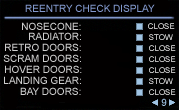
<style>
.page{position:relative;width:179px;height:110px;background:#020000}
.page>*{position:absolute;margin:0}
.t1{font:10px "ArialMT";color:#8298cc;font-variant:small-caps}
.t2{font:10px "ArialMT";color:#cdcdcd;font-variant:small-caps}
.t3{font:8px "ArialMT";font-variant:small-caps}
.t4{font:10px "ArialMT";color:#9fc3e3;font-variant:small-caps}
</style>
<div class="page">
<p class="t1" style="left:25px;top:4px;width:130px;height:8px">REENTRY CHECK DISPLAY</p>
<p class="t2" style="left:22px;top:22px;width:59px;height:8px">NOSECONE:</p>
<p class="t3" style="left:148px;top:23px;width:27px;height:6px">CLOSE</p>
<p class="t2" style="left:29px;top:32px;width:52px;height:8px">RADIATOR:</p>
<p class="t3" style="left:149px;top:34px;width:24px;height:6px">STOW</p>
<p class="t2" style="left:3px;top:54px;width:78px;height:8px">SCRAM DOORS:</p>
<p class="t2" style="left:5px;top:43px;width:76px;height:8px">RETRO DOORS:</p>
<p class="t3" style="left:149px;top:45px;width:27px;height:6px">CLOSE</p>
<p class="t2" style="left:5px;top:65px;width:77px;height:8px">HOVER DOORS:</p>
<p class="t3" style="left:149px;top:56px;width:27px;height:6px">CLOSE</p>
<p class="t2" style="left:4px;top:76px;width:77px;height:8px">LANDING GEAR:</p>
<p class="t3" style="left:149px;top:78px;width:24px;height:6px">STOW</p>
<p class="t3" style="left:149px;top:67px;width:27px;height:6px">CLOSE</p>
<p class="t2" style="left:20px;top:87px;width:61px;height:8px">BAY DOORS:</p>
<p class="t3" style="left:149px;top:89px;width:27px;height:6px">CLOSE</p>
<p class="t4" style="left:161px;top:98px;width:6px;height:8px">9</p>
</div>
